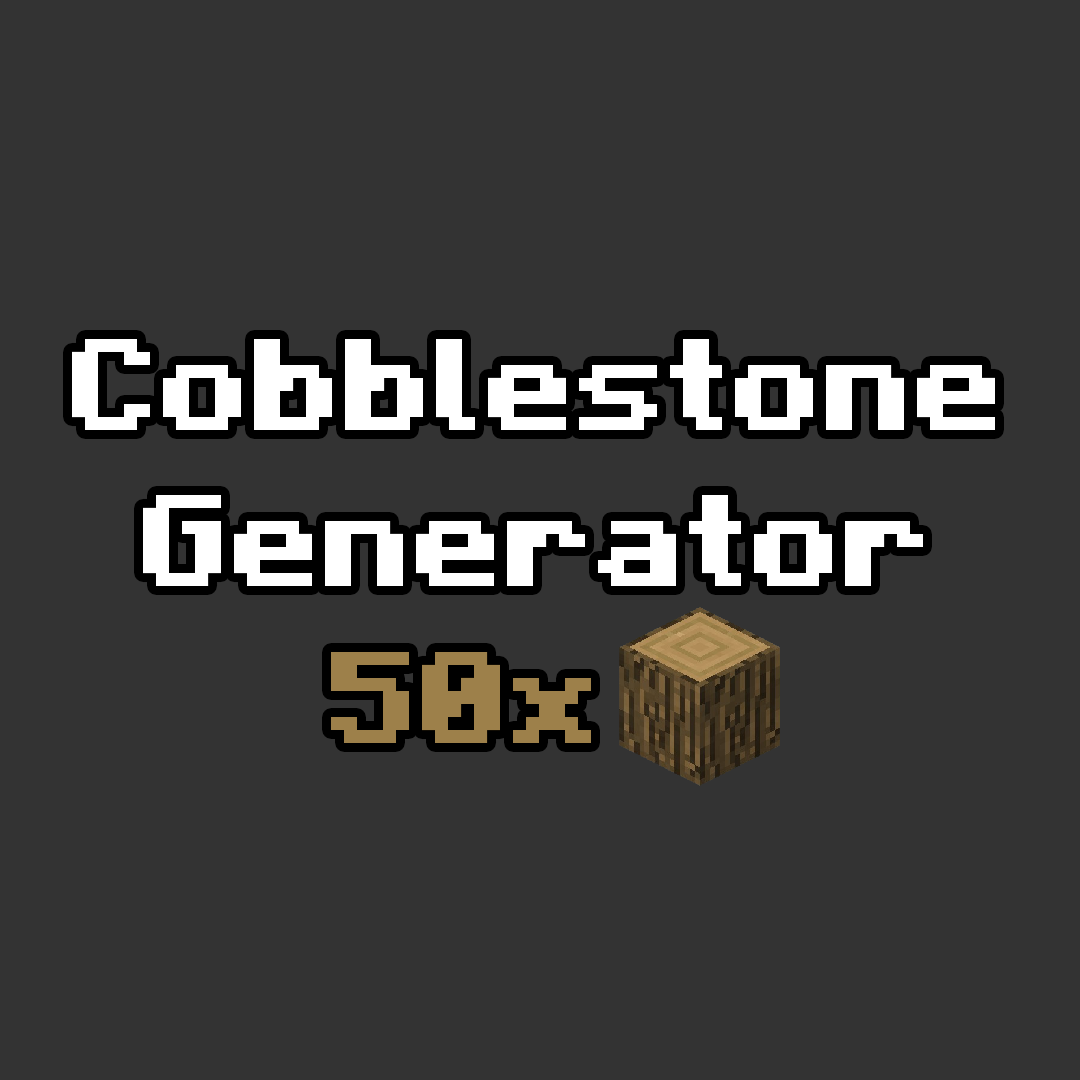
<style>
.page{position:relative;width:1080px;height:1080px;background:#333333}
.page>*{position:absolute;margin:0}
.t1{font:130px "Minecraft-Bold";color:#ffffff}
.t2{font:130px "Minecraft-Bold";color:#9d804a}
</style>
<div class="page">
<p class="t1" style="left:72px;top:339px;width:923px;height:247px;text-align:center">Cobblestone Generator</p>
<p class="t2" style="left:331px;top:652px;width:260px;height:91px">50x</p>
</div>
